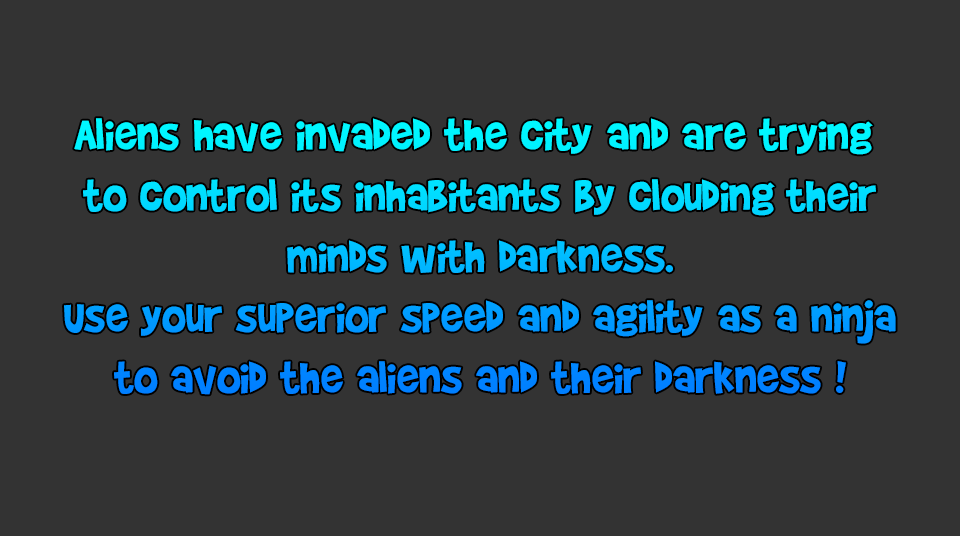
<style>
.page{position:relative;width:960px;height:536px;background:#333333}
.page>*{position:absolute;margin:0}
.t1{font:50.7px "BradyBunchRemastered"}
</style>
<div class="page">
<p class="t1" style="left:64px;top:118px;width:832px;height:277px;text-align:center">Aliens have invaded the city and are trying <br>to control its inhabitants by clouding their<br>minds with darkness.<br>Use your superior speed and agility as a ninja<br>to avoid the aliens and their darkness !</p>
</div>
